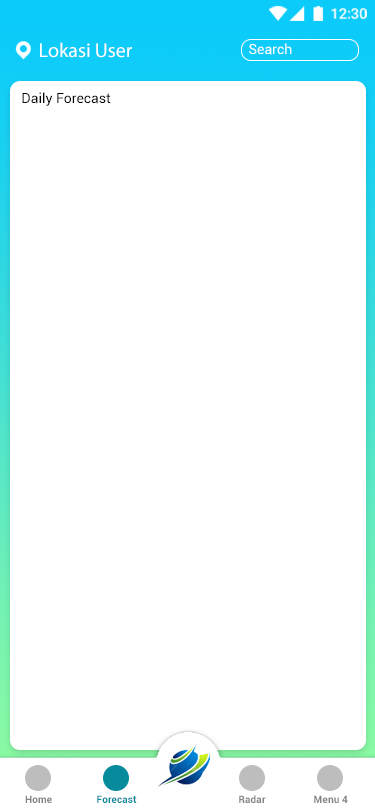
<style>
.page{position:relative;width:375px;height:812px;background:#ffffff}
.page>*{position:absolute;margin:0}
.t1{font:20px "MyriadPro-Regular";color:#ffffff}
.t2{font:14px "Roboto-Regular";color:#ffffff}
.t3{font:14px "Roboto-Regular";color:#000000}
.t4{font:10px "Roboto-Bold";letter-spacing:0.005em;color:#828282}
.t5{font:10px "Roboto-Bold";letter-spacing:0.005em;color:#088a9d}
</style>
<div class="page">
<p class="t1" style="left:40px;top:42px;width:92px;height:16px">Lokasi User</p>
<p class="t2" style="left:249px;top:43px;width:43px;height:12px">Search</p>
<p class="t3" style="left:22px;top:92px;width:89px;height:14px">Daily Forecast</p>
<p class="t4" style="left:25px;top:795px;width:27px;height:8px">Home</p>
<p class="t5" style="left:97px;top:795px;width:40px;height:8px">Forecast</p>
<p class="t4" style="left:239px;top:795px;width:27px;height:8px">Radar</p>
<p class="t4" style="left:314px;top:795px;width:34px;height:8px">Menu 4</p>
</div>
